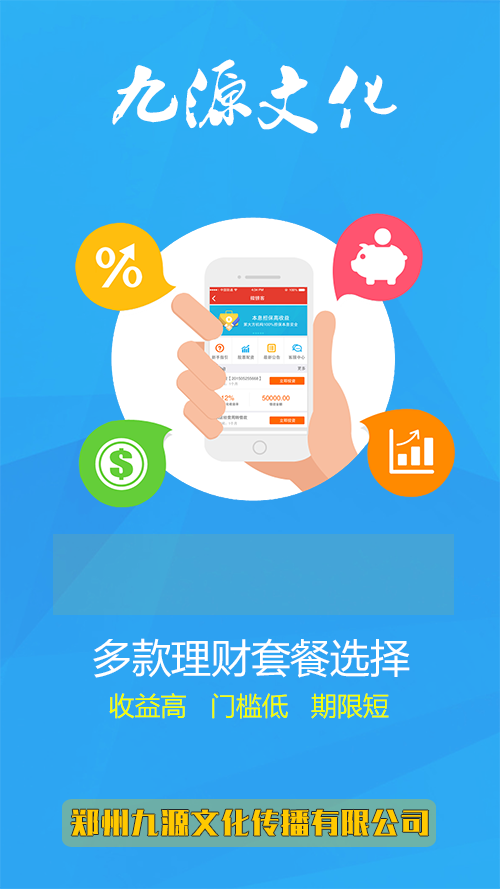
<style>
.page{position:relative;width:500px;height:889px}
.page>*{position:absolute;margin:0}
.t1{font:72px "Ò¶¸ùÓÑÐÐÊé·±";color:#ffffff}
.t2{font:39.8px "MicrosoftYaHei";color:#ffffff}
.t3{font:26px "MicrosoftYaHei";color:#f6ff00}
.t4{font:30px "MFYiHei_Noncommercial-Regular";color:#ffc900}
</style>
<div class="page">
<p class="t1" style="left:112px;top:59px;width:285px;height:75px">九源文化</p>
<p class="t2" style="left:93px;top:638px;width:317px;height:40px">多款理财套餐选择</p>
<p class="t3" style="left:109px;top:693px;width:280px;height:26px">收益高   门槛低   期限短</p>
<p class="t4" style="left:71px;top:809px;width:358px;height:27px">郑州九源文化传播有限公司</p>
</div>
